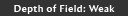
<style>
.page{position:relative;width:128px;height:16px;background:#333333}
.page>*{position:absolute;margin:0}
.t1{font:10px "AmiraParadiso";letter-spacing:0.05em;color:#ffffff}
</style>
<div class="page">
<p class="t1" style="left:14px;top:4px;width:101px;height:10px">Depth of Field: Weak</p>
</div>
